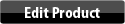
<style>
.page{position:relative;width:125px;height:24px;background:#4d4d4d}
.page>*{position:absolute;margin:0}
.t1{font:13.2px "KozGoPro-Heavy";color:#ffffff}
</style>
<div class="page">
<p class="t1" style="left:25px;top:7px;width:75px;height:11px">Edit Product</p>
</div>
